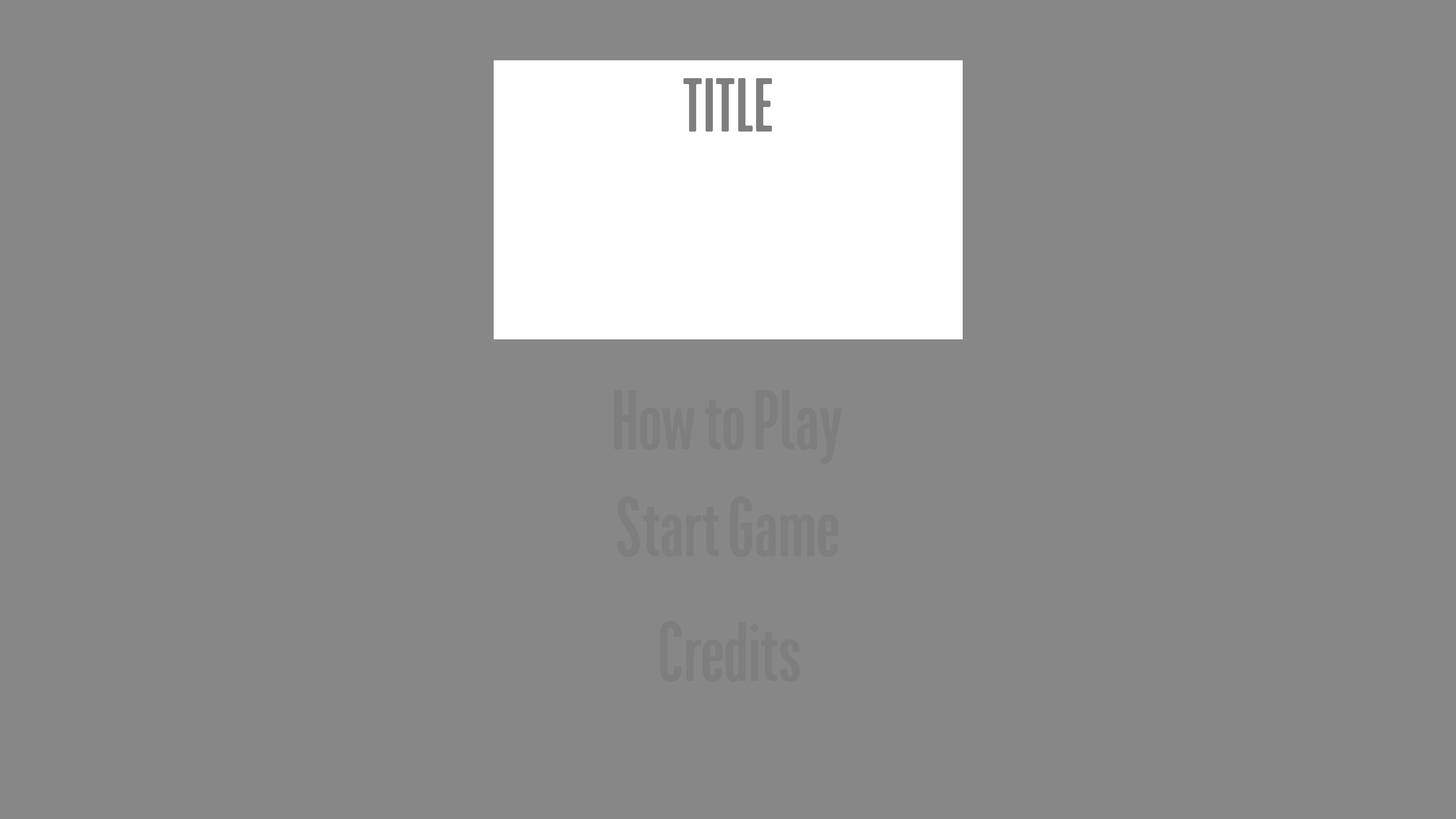
<style>
.page{position:relative;width:1456px;height:819px;background:#878787}
.page>*{position:absolute;margin:0}
.t1{font:79px "CervoNeueCon-Regular";color:#7e7e7e}
</style>
<div class="page">
<p class="t1" style="left:614px;top:390px;width:228px;height:74px">How to Play</p>
<p class="t1" style="left:617px;top:496px;width:221px;height:61px">Start Game</p>
<p class="t1" style="left:660px;top:621px;width:140px;height:61px">Credits</p>
</div>
